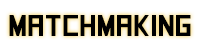
<style>
.page{position:relative;width:200px;height:50px;background:#ffffff}
.page>*{position:absolute;margin:0}
.t1{font:30px "SquareFont";color:#000000}
</style>
<div class="page">
<p class="t1" style="left:9px;top:15px;width:182px;height:21px">MATCHMAKING</p>
</div>
